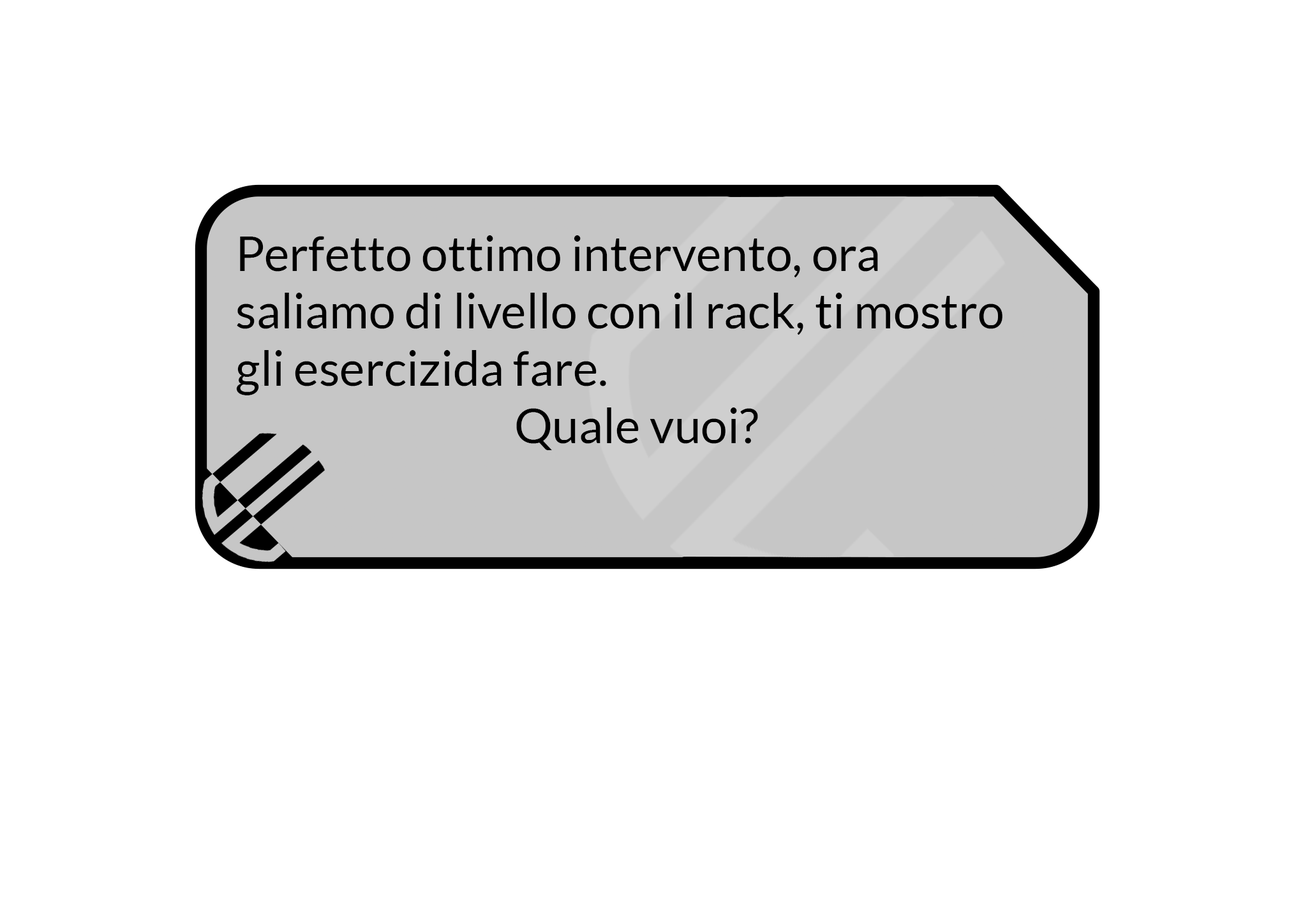
<style>
.page{position:relative;width:1303px;height:915px;background:#ffffff}
.page>*{position:absolute;margin:0}
.t1{font:47.8px "Lato-Regular";color:#000000}
</style>
<div class="page">
<p class="t1" style="left:236px;top:235px;width:766px;height:215px">Perfetto ottimo intervento, ora<br>saliamo di livello con il rack, ti mostro gli esercizida fare.<br>Quale vuoi?</p>
</div>
